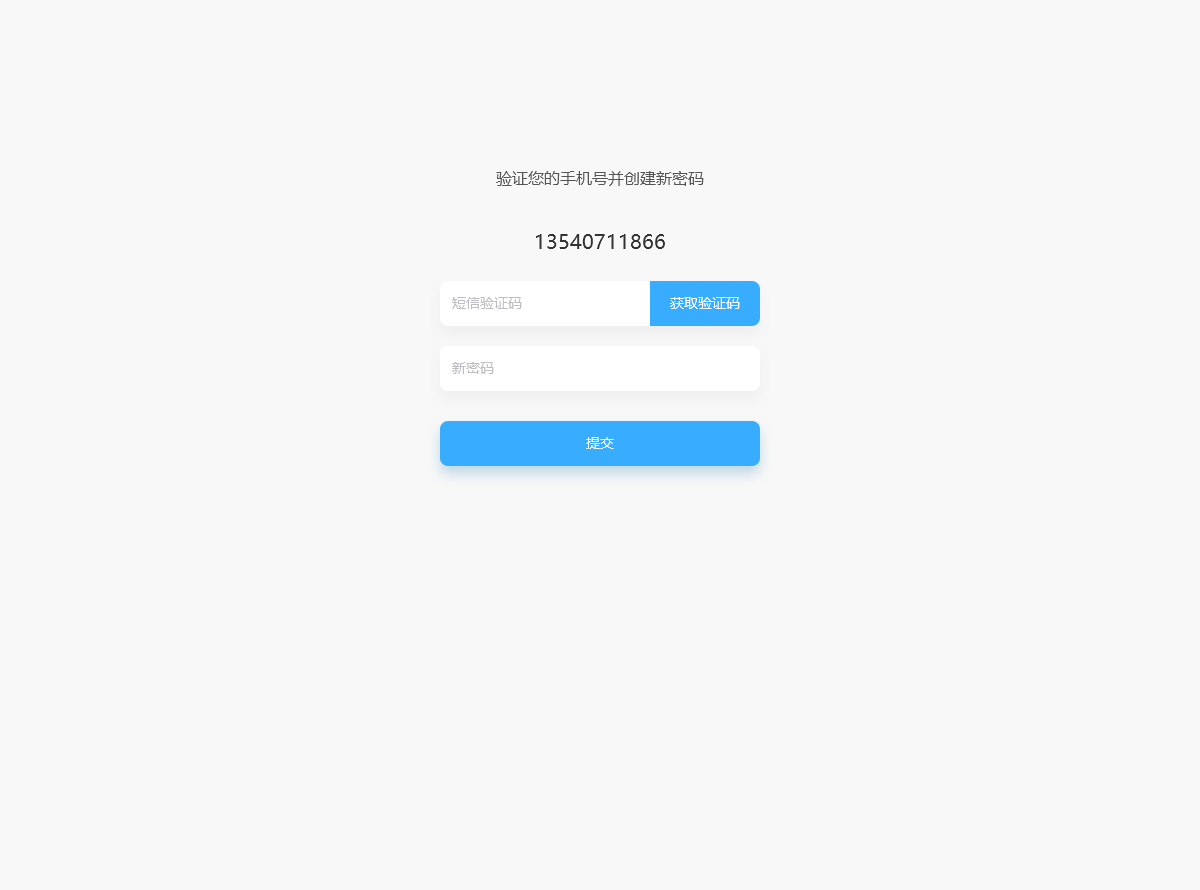
<style>
.page{position:relative;width:1200px;height:890px;background:#f8f8f8}
.page>*{position:absolute;margin:0}
.t1{font:16px "MicrosoftYaHei";color:#555555}
.t2{font:20px "MicrosoftYaHei";color:#333333}
.t3{font:14px "MicrosoftYaHei";color:#bdbdc3}
.t4{font:14px "MicrosoftYaHei";color:#ffffff}
.t5{font:14px "MicrosoftYaHei";color:#feffff}
</style>
<div class="page">
<p class="t1" style="left:496px;top:171px;width:208px;height:15px">验证您的手机号并创建新密码</p>
<p class="t2" style="left:536px;top:234px;width:129px;height:15px">13540711866</p>
<p class="t3" style="left:452px;top:297px;width:70px;height:12px">短信验证码</p>
<p class="t4" style="left:670px;top:297px;width:70px;height:12px">获取验证码</p>
<p class="t3" style="left:452px;top:362px;width:42px;height:12px">新密码</p>
<p class="t5" style="left:586px;top:437px;width:28px;height:12px">提交</p>
</div>
